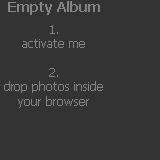
<style>
.page{position:relative;width:160px;height:160px;background:#333333}
.page>*{position:absolute;margin:0}
.t1{font:12px "Tahoma";color:#848484}
.t2{font:14px "Tahoma-Bold";color:#848484}
</style>
<div class="page">
<p class="t1" style="left:4px;top:1px;width:99px;height:107px;text-align:center"><span class="t2">Empty Album<br><br></span>1.<br>activate me<br><br>2.<br>drop photos inside your browser</p>
</div>
